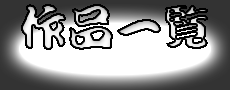
<style>
.page{position:relative;width:230px;height:90px;background:#ffffff}
.page>*{position:absolute;margin:0}
.t1{font:48px "KanteiryuStd-Ultra"}
</style>
<div class="page">
<p class="t1" style="left:21px;top:4px;width:187px;height:46px">作品一覧</p>
</div>
